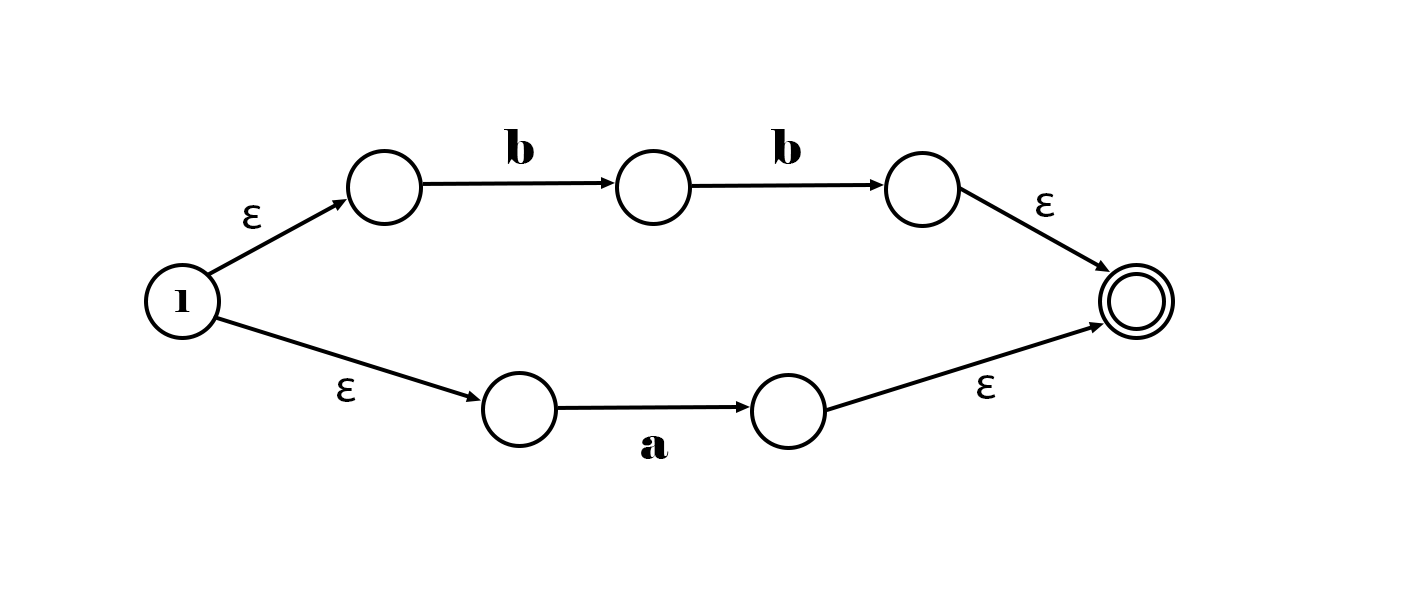
<style>
.page{position:relative;width:1401px;height:603px;background:#ffffff}
.page>*{position:absolute;margin:0}
.t1{font:48px "Elephant-Regular";color:#000000}
.t2{font:48px "MyriadPro-Regular";color:#000000}
.t3{font:30px "Elephant-Regular";color:#000000}
</style>
<div class="page">
<p class="t1" style="left:504px;top:129px;width:30px;height:35px">b</p>
<p class="t1" style="left:771px;top:129px;width:30px;height:35px">b</p>
<p class="t2" style="left:1036px;top:193px;width:19px;height:24px">ε</p>
<p class="t2" style="left:243px;top:205px;width:19px;height:24px">ε</p>
<p class="t3" style="left:174px;top:290px;width:16px;height:22px">1</p>
<p class="t2" style="left:977px;top:375px;width:19px;height:24px">ε</p>
<p class="t2" style="left:337px;top:378px;width:19px;height:24px">ε</p>
<p class="t1" style="left:641px;top:436px;width:28px;height:23px">a</p>
</div>
